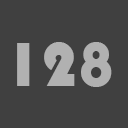
<style>
.page{position:relative;width:128px;height:128px;background:#404040}
.page>*{position:absolute;margin:0}
.t1{font:64px "Bauhaus93";color:#b1b1b1}
</style>
<div class="page">
<p class="t1" style="left:17px;top:42px;width:95px;height:45px">128</p>
</div>
